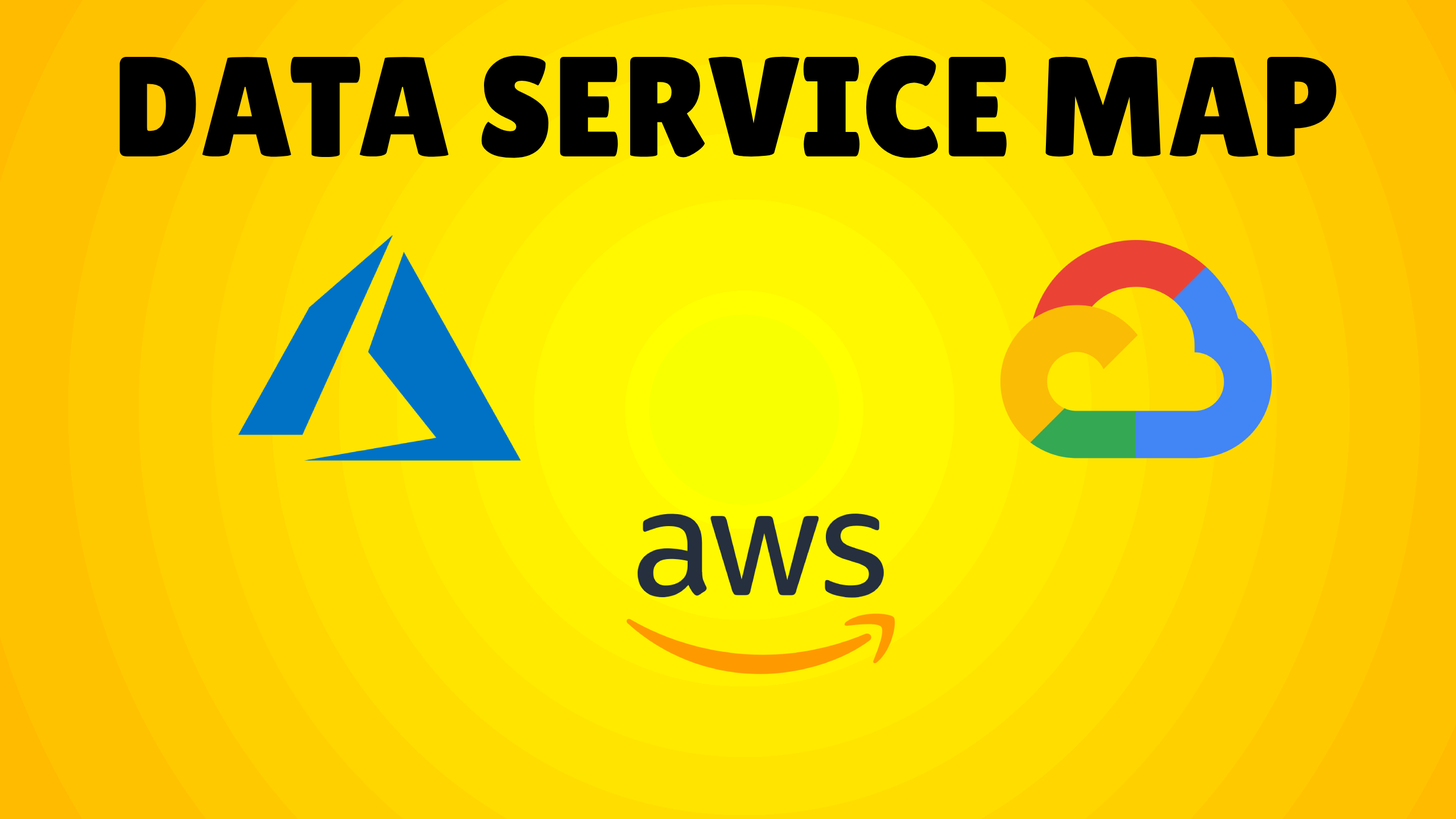
<style>
.page{position:relative;width:1456px;height:819px}
.page>*{position:absolute;margin:0}
.t1{font:142.2px "LilitaOne";color:#000000}
</style>
<div class="page">
<p class="t1" style="left:119px;top:55px;width:1218px;height:103px">DATA SERVICE MAP</p>
</div>
